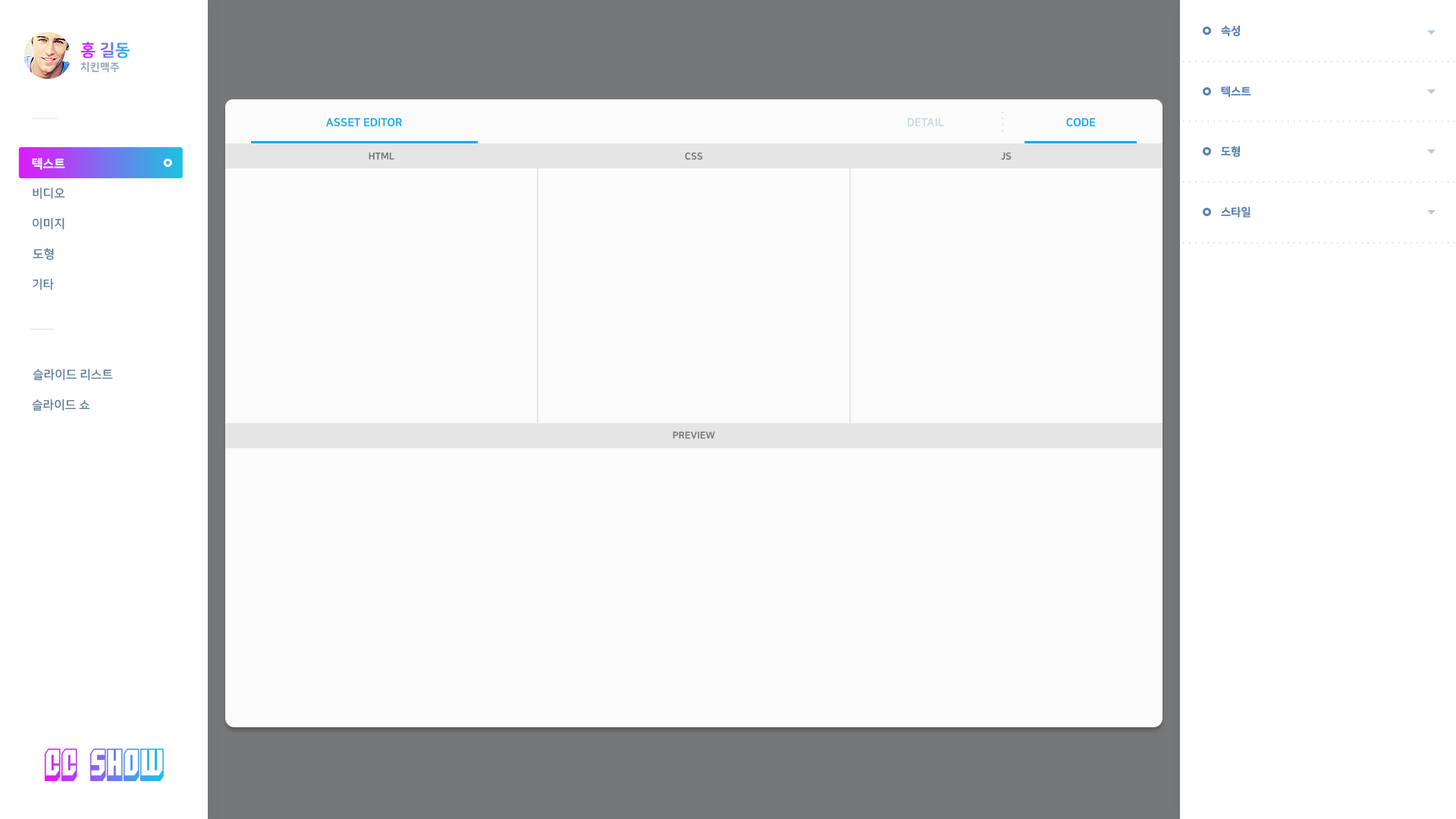
<style>
.page{position:relative;width:1456px;height:819px;background:#fbfbfb}
.page>*{position:absolute;margin:0}
.t1{font:11.1px "NanumSquareEB";color:#5682b2}
.t2{font:16.7px "NanumSquareEB";text-transform:uppercase}
.t3{font:10.6px "NanumSquareEB";letter-spacing:0.025em;color:#94a8ba;text-transform:uppercase}
.t4{font:11.1px "NanumSquareEB";color:#12aaeb;text-transform:uppercase}
.t5{font:11.1px "NanumSquareEB";color:#cfd9e0;text-transform:uppercase}
.t6{font:12.1px "NanumSquareEB";color:#ffffff;text-transform:uppercase}
.t7{font:9.5px "NanumSquareEB";color:#737373;text-transform:uppercase}
.t8{font:12.1px "NanumSquareB";color:#597a96;text-transform:uppercase}
.t9{font:31.6px "Blockt"}
</style>
<div class="page">
<p class="t1" style="left:1221px;top:25px;width:19px;height:11px">속성</p>
<p class="t2" style="left:80px;top:42px;width:50px;height:16px">홍 길동</p>
<p class="t3" style="left:80px;top:61px;width:40px;height:12px">치킨맥주</p>
<p class="t1" style="left:1221px;top:86px;width:30px;height:11px">텍스트</p>
<p class="t4" style="left:326px;top:118px;width:76px;height:9px">Asset EDITOR</p>
<p class="t5" style="left:907px;top:118px;width:37px;height:9px">DETAIL</p>
<p class="t4" style="left:1066px;top:118px;width:30px;height:9px">CODE</p>
<p class="t1" style="left:1221px;top:146px;width:19px;height:11px">도형</p>
<p class="t6" style="left:32px;top:158px;width:33px;height:12px">텍스트</p>
<p class="t7" style="left:369px;top:152px;width:25px;height:8px">HTML</p>
<p class="t7" style="left:685px;top:152px;width:18px;height:8px">CSS</p>
<p class="t7" style="left:1001px;top:152px;width:11px;height:8px">JS</p>
<p class="t8" style="left:33px;top:187px;width:32px;height:12px">비디오</p>
<p class="t1" style="left:1221px;top:206px;width:29px;height:12px">스타일</p>
<p class="t8" style="left:33px;top:218px;width:31px;height:12px">이미지</p>
<p class="t8" style="left:33px;top:248px;width:21px;height:12px">도형</p>
<p class="t8" style="left:33px;top:278px;width:21px;height:12px">기타</p>
<p class="t8" style="left:33px;top:369px;width:80px;height:12px">슬라이드 리스트</p>
<p class="t8" style="left:32px;top:399px;width:58px;height:12px">슬라이드 쇼</p>
<p class="t7" style="left:673px;top:431px;width:42px;height:8px">PREVIEW</p>
<p class="t9" style="left:44px;top:748px;width:120px;height:34px">CC SHOW</p>
</div>
